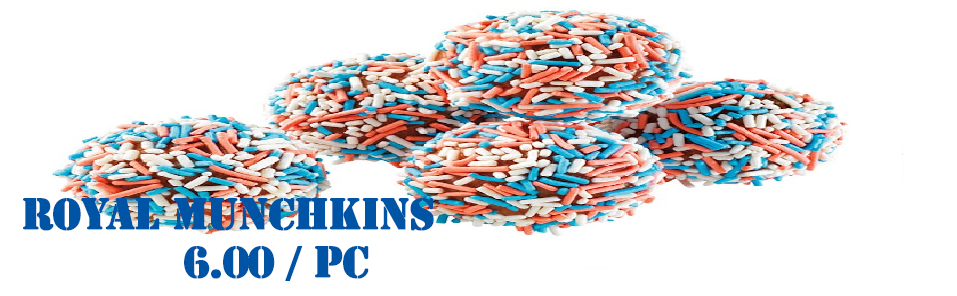
<style>
.page{position:relative;width:957px;height:296px;background:#ffffff}
.page>*{position:absolute;margin:0}
.t1{font:40px "StencilStd";letter-spacing:-0.025em;color:#0054a6;font-weight:bold}
</style>
<div class="page">
<p class="t1" style="left:23px;top:198px;width:411px;height:83px;text-align:center">ROYAL muNCHKINS<br>       6.00 / PC</p>
</div>
